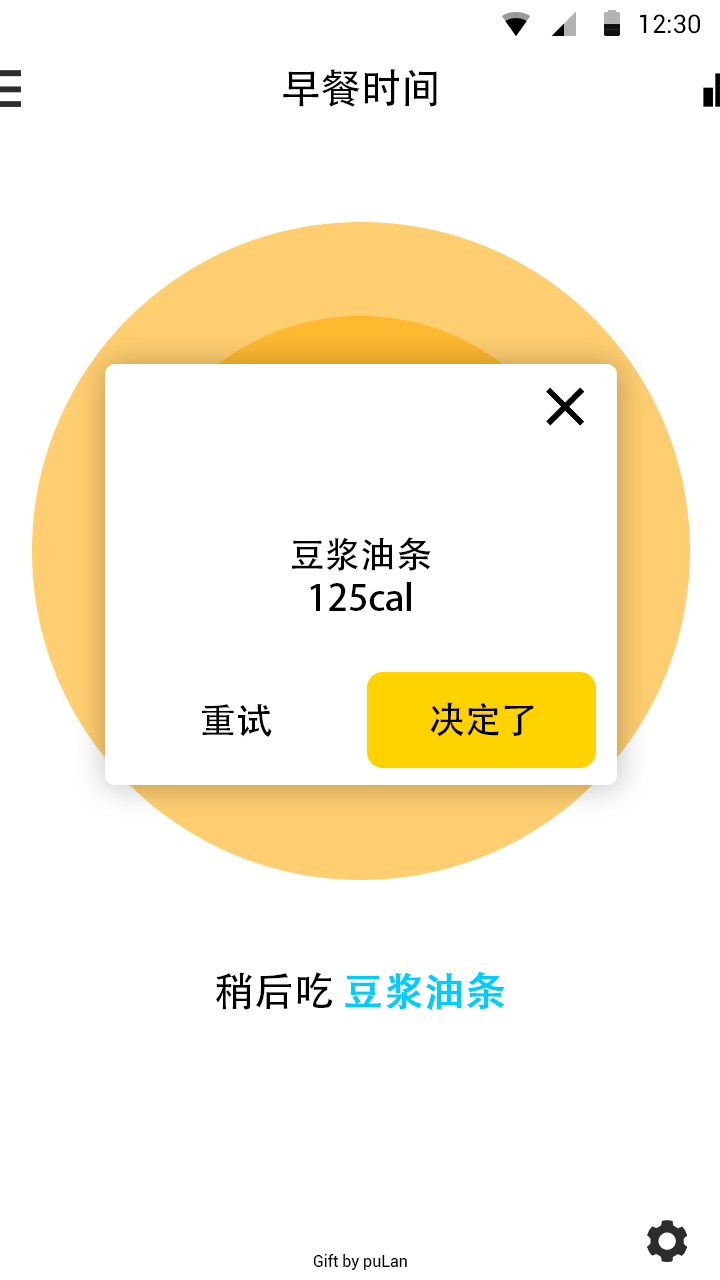
<style>
.page{position:relative;width:720px;height:1280px;background:#ffffff}
.page>*{position:absolute;margin:0}
.t1{font:25.4px "Roboto-Regular";color:#000000}
.t2{font:40px "AdobeHeitiStd-Regular";letter-spacing:-0.004em;color:#000000}
.t3{font:36px "AdobeHeitiStd-Regular";letter-spacing:-0.004em;color:#000000}
.t4{font:40px "AdobeHeitiStd-Regular";letter-spacing:-0.004em;color:#00ccff;font-weight:bold}
.t5{font:16px "Roboto-Regular";letter-spacing:-0.004em;color:#000000}
</style>
<div class="page">
<p class="t1" style="left:640px;top:14px;width:60px;height:20px">12:30</p>
<p class="t2" style="left:283px;top:69px;width:154px;height:38px">早餐时间</p>
<p class="t3" style="left:292px;top:537px;width:139px;height:74px;text-align:center">豆浆油条<br>125cal</p>
<p class="t3" style="left:430px;top:702px;width:104px;height:35px">决定了</p>
<p class="t3" style="left:202px;top:704px;width:70px;height:33px">重试</p>
<p class="t4" style="left:216px;top:972px;width:289px;height:38px"><span class="t2">稍后吃 </span>豆浆油条</p>
<p class="t5" style="left:313px;top:1254px;width:94px;height:16px">Gift by puLan</p>
</div>
